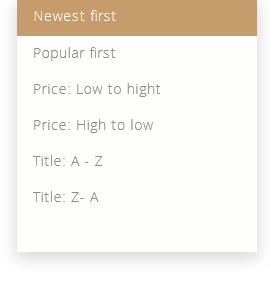
<style>
.page{position:relative;width:271px;height:296px;background:#fefefd}
.page>*{position:absolute;margin:0}
.t1{font:14px "OpenSans-Light";letter-spacing:0.05em;color:#fefefd}
.t2{font:14px "OpenSans-Light";letter-spacing:0.05em;color:#8c8c8c}
</style>
<div class="page">
<p class="t1" style="left:34px;top:10px;width:82px;height:11px">Newest first</p>
<p class="t2" style="left:34px;top:47px;width:81px;height:14px">Popular first</p>
<p class="t2" style="left:34px;top:83px;width:126px;height:14px">Price: Low to hight</p>
<p class="t2" style="left:34px;top:119px;width:119px;height:14px">Price: High to low</p>
<p class="t2" style="left:33px;top:155px;width:70px;height:11px">Title: A - Z</p>
<p class="t2" style="left:33px;top:191px;width:66px;height:11px">Title: Z- A</p>
</div>
